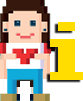
<style>
.page{position:relative;width:83px;height:101px;background:#ffffff}
.page>*{position:absolute;margin:0}
.t1{font:66px "Dogica_Pixel_Bold";color:#ffdd00}
</style>
<div class="page">
<p class="t1" style="left:50px;top:22px;width:33px;height:58px">i</p>
</div>
